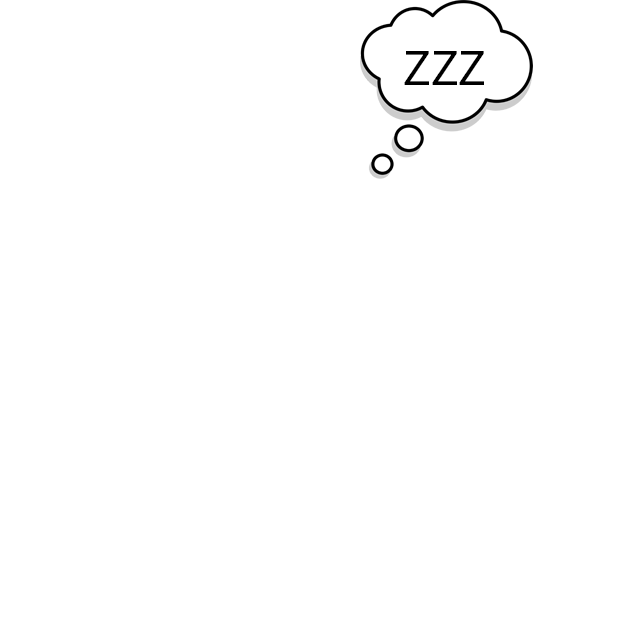
<style>
.page{position:relative;width:626px;height:626px;background:#ffffff}
.page>*{position:absolute;margin:0}
.t1{font:50px "MyriadPro-Regular";color:#000000}
</style>
<div class="page">
<p class="t1" style="left:404px;top:51px;width:80px;height:34px">ZZZ</p>
</div>
